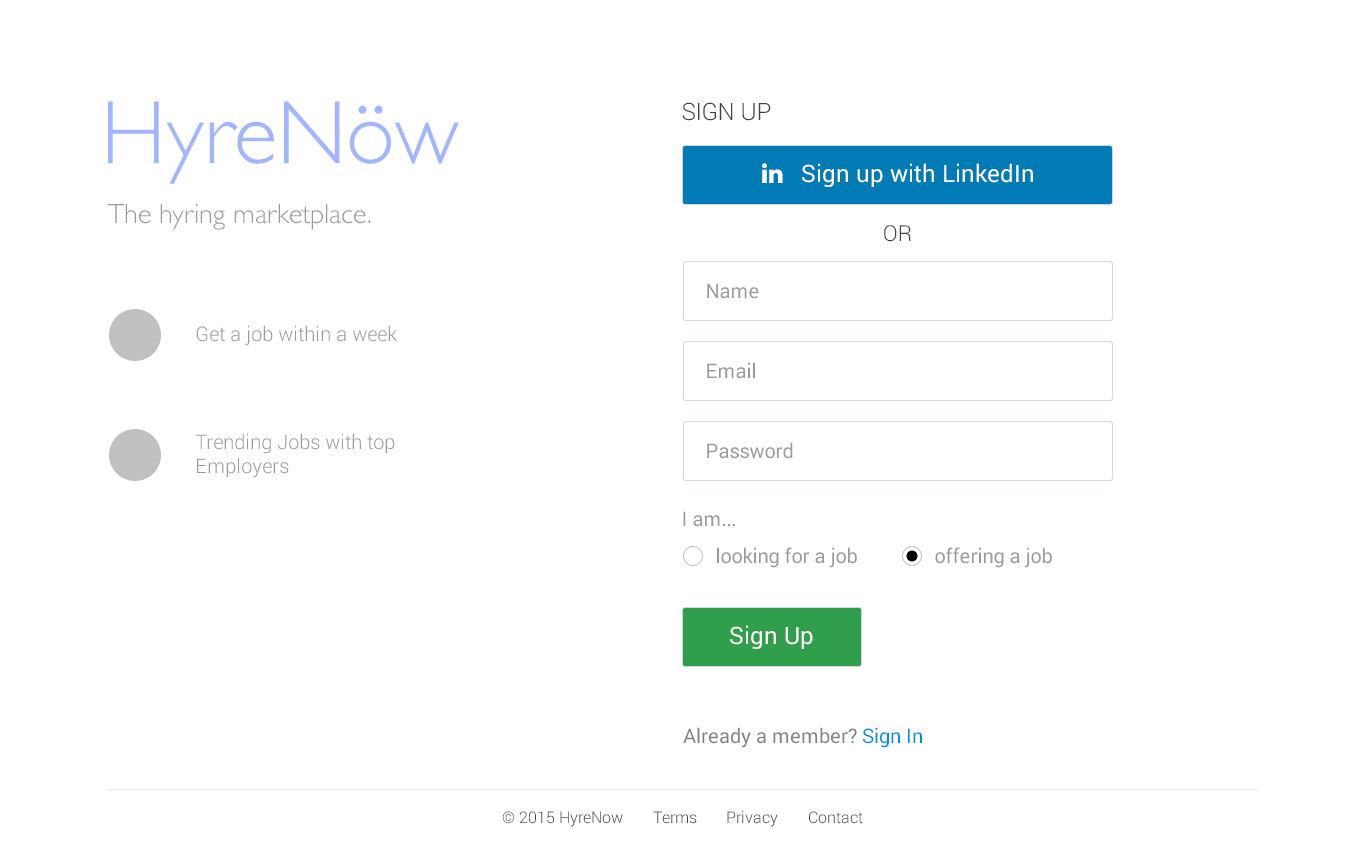
<style>
.page{position:relative;width:1366px;height:850px;background:#ffffff}
.page>*{position:absolute;margin:0}
.t1{font:90px "GillSans-Light";color:#a3b5ff}
.t2{font:24px "Roboto-Light";color:#404040}
.t3{font:28px "GillSans-Light";color:#9a9a9a}
.t4{font:22px "Roboto-Light";color:#404040}
.t5{font:20px "Roboto-Regular";color:#9a9a9a}
.t6{font:20px "Roboto-Light";color:#9a9a9a}
.t7{font:24px "Roboto-Regular";color:#ffffff}
.t8{font:20px "Roboto-Regular";color:#818181}
.t9{font:20px "Roboto-Regular";color:#008be7}
.t10{font:16px "Roboto-Light";color:#404040}
.t11{font:16px "Roboto-Light"}
</style>
<div class="page">
<p class="t1" style="left:108px;top:101px;width:351px;height:83px">HyreNöw</p>
<p class="t2" style="left:682px;top:102px;width:89px;height:19px">SIGN UP</p>
<p class="t3" style="left:108px;top:204px;width:263px;height:26px">The hyring marketplace.</p>
<p class="t4" style="left:884px;top:225px;width:27px;height:17px">OR</p>
<p class="t5" style="left:707px;top:283px;width:52px;height:16px">Name</p>
<p class="t6" style="left:196px;top:325px;width:201px;height:21px">Get a job within a week</p>
<p class="t5" style="left:707px;top:362px;width:48px;height:17px">Email</p>
<p class="t6" style="left:195px;top:433px;width:200px;height:45px">Trending Jobs with top<br>Employers</p>
<p class="t5" style="left:707px;top:442px;width:86px;height:17px">Password</p>
<p class="t5" style="left:683px;top:511px;width:52px;height:16px">I am...</p>
<p class="t5" style="left:717px;top:547px;width:140px;height:21px">looking for a job</p>
<p class="t5" style="left:935px;top:547px;width:117px;height:21px">offering a job</p>
<p class="t7" style="left:730px;top:625px;width:83px;height:24px">Sign Up</p>
<p class="t8" style="left:683px;top:727px;width:239px;height:21px">Already a member? <span class="t9">Sign In</span></p>
<p class="t10" style="left:502px;top:811px;width:121px;height:16px">© 2015 HyreNow</p>
<p class="t10" style="left:653px;top:811px;width:44px;height:13px">Terms</p>
<p class="t11" style="left:727px;top:810px;width:51px;height:17px">Privacy</p>
<p class="t10" style="left:809px;top:811px;width:54px;height:13px">Contact</p>
</div>
